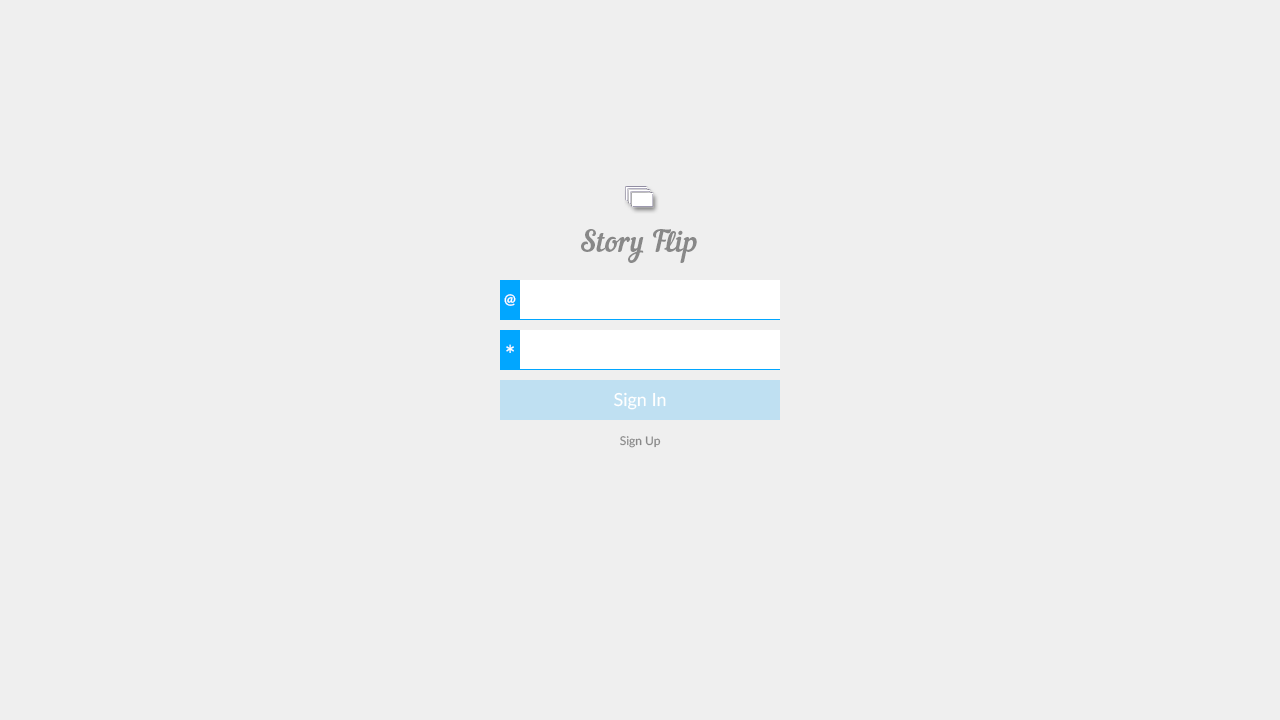
<style>
.page{position:relative;width:1280px;height:720px;background:#efefef}
.page>*{position:absolute;margin:0}
.t1{font:30px "NautilusPompilius";color:#888888}
.t2{font:14px "Lato-Bold";color:#ffffff}
.t3{font:24px "Lato-Bold";color:#ffffff}
.t4{font:18px "Lato-Regular";color:#ffffff}
.t5{font:12px "Lato-Regular";color:#888888}
</style>
<div class="page">
<p class="t1" style="left:581px;top:229px;width:116px;height:34px">Story Flip</p>
<p class="t2" style="left:504px;top:294px;width:12px;height:12px">@</p>
<p class="t3" style="left:506px;top:344px;width:8px;height:9px">*</p>
<p class="t4" style="left:614px;top:392px;width:52px;height:18px">Sign In</p>
<p class="t5" style="left:620px;top:436px;width:41px;height:12px">Sign Up</p>
</div>
